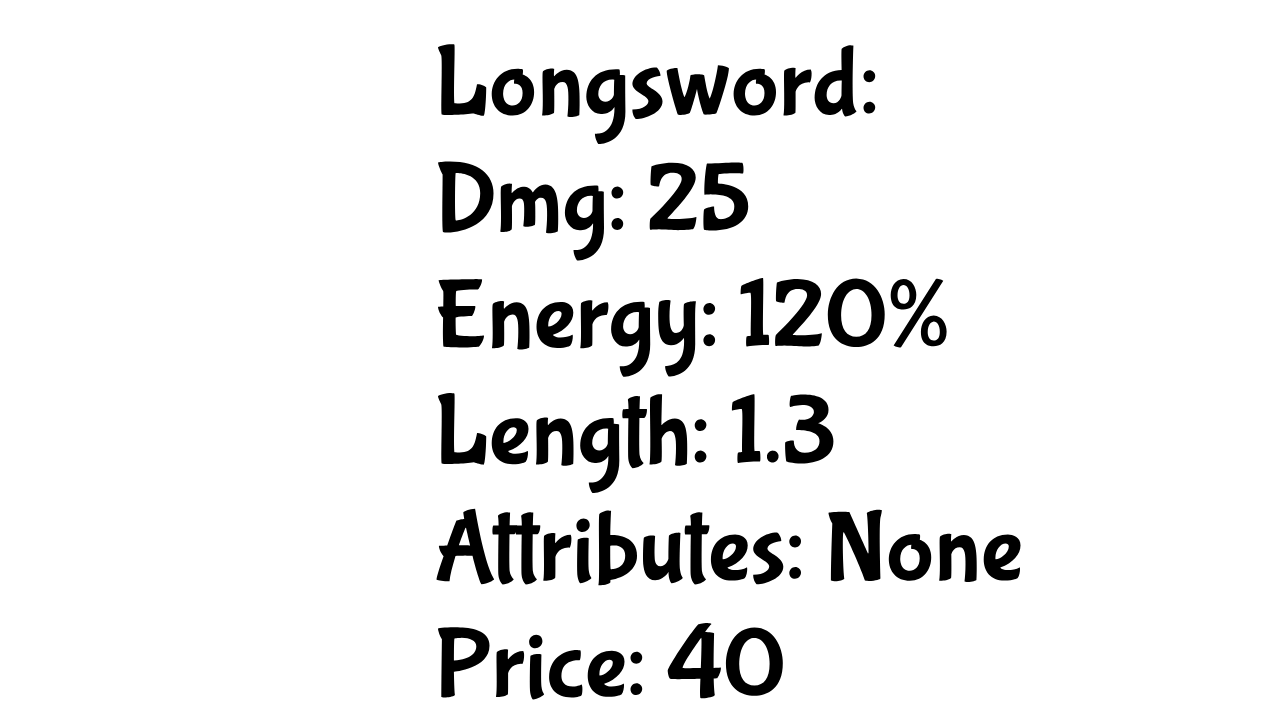
<style>
.page{position:relative;width:1280px;height:720px;background:#ffffff}
.page>*{position:absolute;margin:0}
.t1{font:100px "BubblegumSans-Regular";color:#000000}
</style>
<div class="page">
<p class="t1" style="left:436px;top:44px;width:585px;height:656px">Longsword:<br>Dmg: 25<br>Energy: 120%<br>Length: 1.3 <br>Attributes: None<br>Price: 40</p>
</div>
